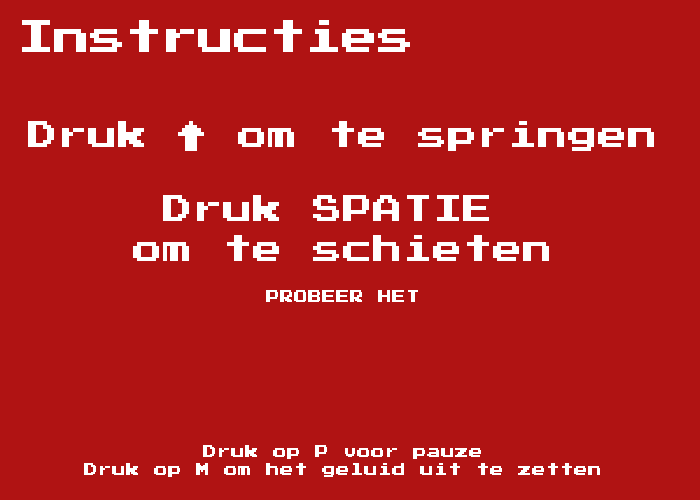
<style>
.page{position:relative;width:700px;height:500px;background:#b01313}
.page>*{position:absolute;margin:0}
.t1{font:36px "PressStart2P";color:#ffffff}
.t2{font:30px "PressStart2P";color:#ffffff}
.t3{font:30px/40px "PressStart2P";color:#ffffff}
.t4{font:14px "PressStart2P";color:#ffffff}
.t5{font:14px/18px "PressStart2P";color:#ffffff}
</style>
<div class="page">
<p class="t1" style="left:22px;top:20px;width:388px;height:32px">Instructies</p>
<p class="t2" style="left:28px;top:121px;width:626px;height:30px">Druk ↑ om te springen</p>
<p class="t3" style="left:133px;top:195px;width:416px;height:66px;text-align:center">Druk SPATIE <br>om te schieten</p>
<p class="t4" style="left:266px;top:290px;width:152px;height:12px">PROBEER HET</p>
<p class="t5" style="left:84px;top:445px;width:516px;height:32px;text-align:center">Druk op P voor pauze<br>Druk op M om het geluid uit te zetten</p>
</div>
